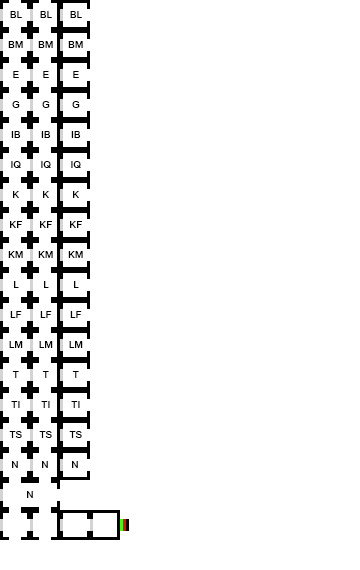
<style>
.page{position:relative;width:360px;height:570px;background:#ffffff}
.page>*{position:absolute;margin:0}
.t1{font:12px "ArialMT";color:#000000;font-variant:small-caps}
</style>
<div class="page">
<p class="t1" style="left:10px;top:11px;width:12px;height:7px">bl</p>
<p class="t1" style="left:40px;top:11px;width:12px;height:7px">bl</p>
<p class="t1" style="left:70px;top:11px;width:12px;height:7px">bl</p>
<p class="t1" style="left:8px;top:41px;width:15px;height:7px">bm</p>
<p class="t1" style="left:38px;top:41px;width:15px;height:7px">bm</p>
<p class="t1" style="left:68px;top:41px;width:15px;height:7px">bm</p>
<p class="t1" style="left:13px;top:71px;width:6px;height:7px">e</p>
<p class="t1" style="left:43px;top:71px;width:6px;height:7px">e</p>
<p class="t1" style="left:73px;top:71px;width:6px;height:7px">e</p>
<p class="t1" style="left:12px;top:101px;width:8px;height:7px">g</p>
<p class="t1" style="left:42px;top:101px;width:8px;height:7px">g</p>
<p class="t1" style="left:72px;top:101px;width:8px;height:7px">g</p>
<p class="t1" style="left:11px;top:131px;width:10px;height:7px">ib</p>
<p class="t1" style="left:41px;top:131px;width:10px;height:7px">ib</p>
<p class="t1" style="left:71px;top:131px;width:10px;height:7px">ib</p>
<p class="t1" style="left:11px;top:161px;width:10px;height:7px">iq</p>
<p class="t1" style="left:41px;top:161px;width:10px;height:7px">iq</p>
<p class="t1" style="left:71px;top:161px;width:10px;height:7px">iq</p>
<p class="t1" style="left:13px;top:191px;width:6px;height:7px">k</p>
<p class="t1" style="left:43px;top:191px;width:6px;height:7px">k</p>
<p class="t1" style="left:73px;top:191px;width:6px;height:7px">k</p>
<p class="t1" style="left:10px;top:221px;width:12px;height:7px">kf</p>
<p class="t1" style="left:40px;top:221px;width:12px;height:7px">kf</p>
<p class="t1" style="left:70px;top:221px;width:12px;height:7px">kf</p>
<p class="t1" style="left:8px;top:251px;width:15px;height:7px">km</p>
<p class="t1" style="left:38px;top:251px;width:15px;height:7px">km</p>
<p class="t1" style="left:68px;top:251px;width:15px;height:7px">km</p>
<p class="t1" style="left:14px;top:281px;width:5px;height:7px">l</p>
<p class="t1" style="left:44px;top:281px;width:5px;height:7px">l</p>
<p class="t1" style="left:74px;top:281px;width:5px;height:7px">l</p>
<p class="t1" style="left:10px;top:311px;width:12px;height:7px">lf</p>
<p class="t1" style="left:40px;top:311px;width:12px;height:7px">lf</p>
<p class="t1" style="left:70px;top:311px;width:12px;height:7px">lf</p>
<p class="t1" style="left:9px;top:341px;width:14px;height:7px">lm</p>
<p class="t1" style="left:39px;top:341px;width:14px;height:7px">lm</p>
<p class="t1" style="left:69px;top:341px;width:14px;height:7px">lm</p>
<p class="t1" style="left:12px;top:371px;width:7px;height:7px">t</p>
<p class="t1" style="left:42px;top:371px;width:7px;height:7px">t</p>
<p class="t1" style="left:72px;top:371px;width:7px;height:7px">t</p>
<p class="t1" style="left:11px;top:401px;width:9px;height:7px">ti</p>
<p class="t1" style="left:41px;top:401px;width:9px;height:7px">ti</p>
<p class="t1" style="left:71px;top:401px;width:9px;height:7px">ti</p>
<p class="t1" style="left:9px;top:431px;width:13px;height:7px">ts</p>
<p class="t1" style="left:39px;top:431px;width:13px;height:7px">ts</p>
<p class="t1" style="left:69px;top:431px;width:13px;height:7px">ts</p>
<p class="t1" style="left:12px;top:461px;width:6px;height:7px">n</p>
<p class="t1" style="left:42px;top:461px;width:6px;height:7px">n</p>
<p class="t1" style="left:72px;top:461px;width:6px;height:7px">n</p>
<p class="t1" style="left:27px;top:491px;width:6px;height:7px">n</p>
</div>
